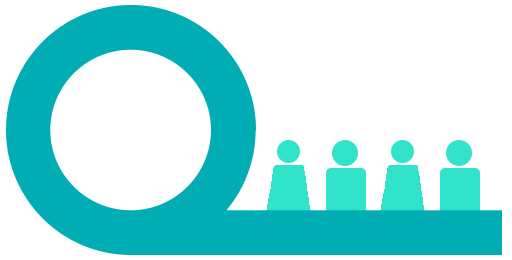
<style>
.page{position:relative;width:512px;height:260px;background:#ffffff}
.page>*{position:absolute;margin:0}
.t1{font:357.5px "AzonixRegular";color:#00adb5}
</style>
<div class="page">
<p class="t1" style="left:6px;top:4px;width:250px;height:251px">Q</p>
</div>
